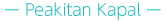
<style>
.page{position:relative;width:166px;height:22px;background:#ffffff}
.page>*{position:absolute;margin:0}
.t1{font:16px "UDShinGoPro-Light";color:#1dbcc0}
</style>
<div class="page">
<p class="t1" style="left:5px;top:2px;width:156px;height:18px">ー Peakitan Kapal ー</p>
</div>
